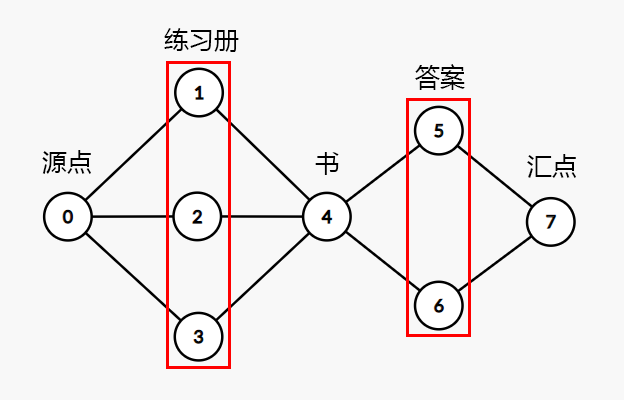
<style>
.page{position:relative;width:624px;height:400px;background:#f8f8f8}
.page>*{position:absolute;margin:0}
.t1{font:25px "MicrosoftYaHei";color:#000000}
</style>
<div class="page">
<p class="t1" style="left:164px;top:28px;width:75px;height:24px">练习册</p>
<p class="t1" style="left:415px;top:64px;width:50px;height:26px">答案</p>
<p class="t1" style="left:42px;top:150px;width:49px;height:24px">源点</p>
<p class="t1" style="left:315px;top:152px;width:24px;height:23px">书</p>
<p class="t1" style="left:527px;top:154px;width:49px;height:24px">汇点</p>
</div>
